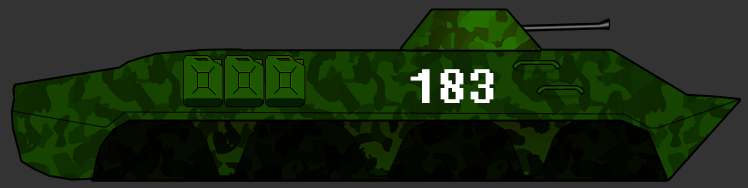
<style>
.page{position:relative;width:748px;height:188px;background:#333333}
.page>*{position:absolute;margin:0}
.t1{font:48px "Fixedsys";color:#ffffff}
</style>
<div class="page">
<p class="t1" style="left:410px;top:69px;width:84px;height:34px">183</p>
</div>
